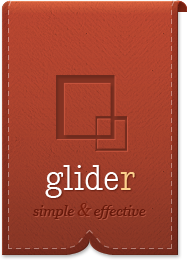
<style>
.page{position:relative;width:187px;height:260px}
.page>*{position:absolute;margin:0}
.t1{font:34px "NadiaSerifNormal";color:#ffffff}
.t2{font:34px "NadiaSerifNormal";color:#fcd18e}
.t3{font:14px "Georgia-Italic";color:#66190b}
.t4{font:18px "Georgia-Italic";color:#751d0c}
</style>
<div class="page">
<p class="t1" style="left:45px;top:165px;width:90px;height:33px">glide<span class="t2">r</span></p>
<p class="t3" style="left:33px;top:203px;width:113px;height:16px">simple <span class="t4">&amp;</span> effective</p>
</div>
